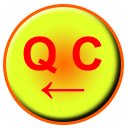
<style>
.page{position:relative;width:128px;height:128px;background:#ffffff}
.page>*{position:absolute;margin:0}
.t1{font:46.3px/31.7px "Arial-BoldMT";color:#ff0000}
.t2{font:46.3px/31.7px "Arial-BoldMT";letter-spacing:0.02em;color:#ff0000}
</style>
<div class="page">
<p class="t1" style="left:23px;top:36px;width:79px;height:63px;text-align:center">Q C<br><span class="t2">←</span></p>
</div>
